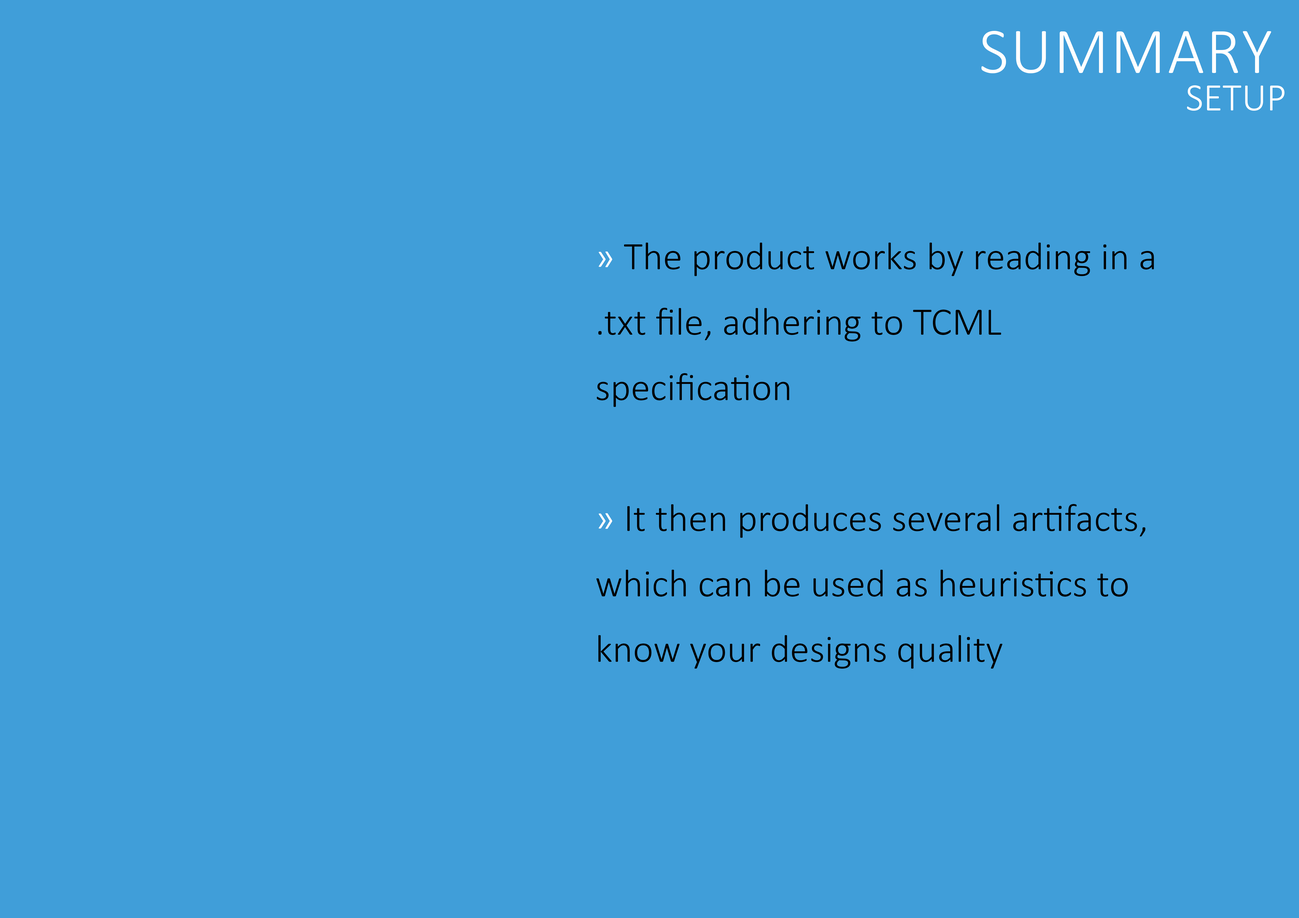
<style>
.page{position:relative;width:1299px;height:918px;background:#409ed9}
.page>*{position:absolute;margin:0}
.t1{font:65.4px "Calibri-Light";letter-spacing:0.025em;color:#ffffff;text-transform:uppercase}
.t2{font:39.3px "Calibri-Light";color:#ffffff;text-transform:uppercase}
.t3{font:39.3px/65.4px "Calibri-Light";color:#000000}
.t4{font:39.3px/65.4px "Calibri-Light";color:#ffffff}
</style>
<div class="page">
<p class="t1" style="left:981px;top:31px;width:290px;height:42px">summary</p>
<p class="t2" style="left:1187px;top:85px;width:97px;height:26px">setup</p>
<p class="t3" style="left:596px;top:243px;width:558px;height:426px"><span class="t4">» </span>The product works by reading in a .txt file, adhering to TCML specification<br><br><span class="t4">» </span>It then produces several artifacts, which can be used as heuristics to know your designs quality</p>
</div>
